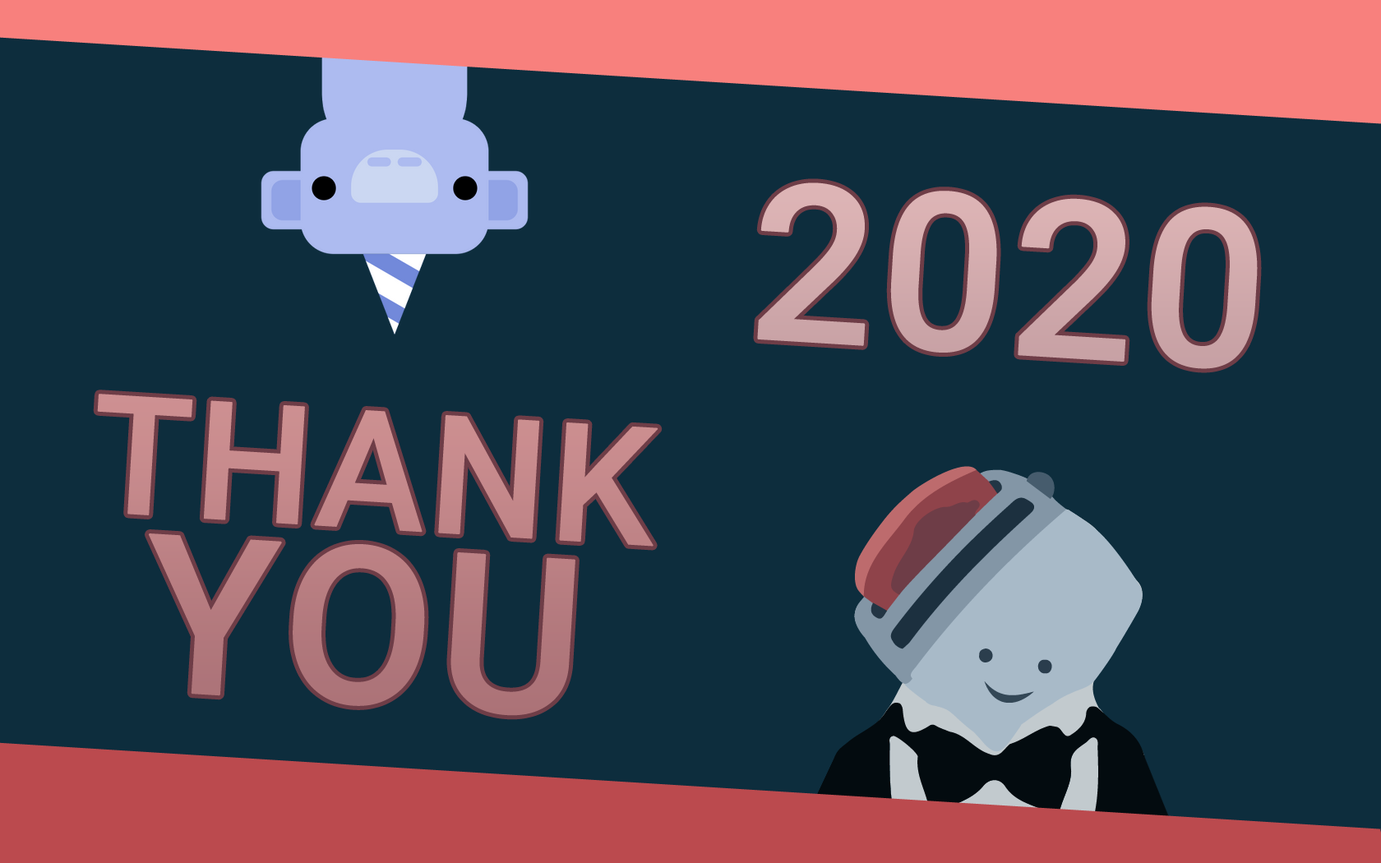
<style>
.page{position:relative;width:1381px;height:863px;background:#0d2d3d}
.page>*{position:absolute;margin:0}
.t1{font:219.2px "Roboto-Medium";color:#d2abad;font-weight:bold}
.t2{font:164.4px/175.4px "Roboto-Medium";color:#bf8386;font-weight:bold}
.t3{font:219.2px/175.4px "Roboto-Medium";color:#bf8386;font-weight:bold}
</style>
<div class="page">
<p class="t1" style="left:757px;top:183px;width:501px;height:186px;rotate:3deg">2020</p>
<p class="t2" style="left:97px;top:394px;width:562px;height:322px;text-align:center;rotate:3deg">THANK<br><span class="t3">YOU</span></p>
</div>
